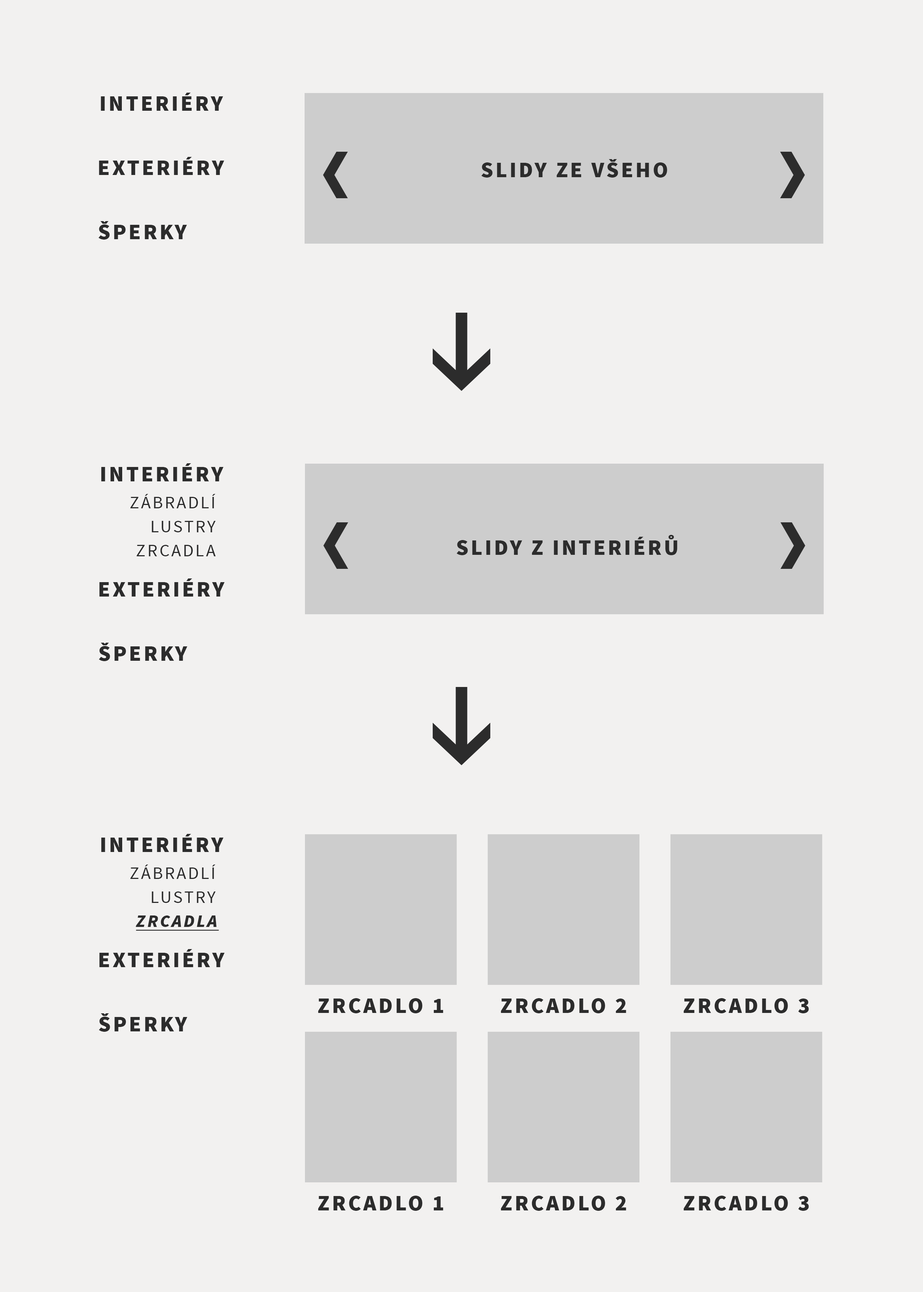
<style>
.page{position:relative;width:923px;height:1292px;background:#f2f1f0}
.page>*{position:absolute;margin:0}
.t1{font:22.1px "SourceSansPro-Black";letter-spacing:0.1em;color:#2c2c2c;text-transform:uppercase}
.t2{font:17.7px "SourceSansPro-Regular";letter-spacing:0.1em;color:#2c2c2c;text-transform:uppercase}
.t3{font:17.7px "SourceSansPro-BlackIt";letter-spacing:0.1em;color:#2c2c2c;text-transform:uppercase;text-decoration:underline}
</style>
<div class="page">
<p class="t1" style="left:101px;top:93px;width:122px;height:18px">Interiéry</p>
<p class="t1" style="left:99px;top:157px;width:125px;height:18px">exteriéry</p>
<p class="t1" style="left:481px;top:159px;width:186px;height:19px">slidy ze všeho</p>
<p class="t1" style="left:98px;top:221px;width:89px;height:19px">šperky</p>
<p class="t1" style="left:101px;top:463px;width:123px;height:18px">Interiéry</p>
<p class="t2" style="left:130px;top:494px;width:86px;height:14px">zábradlí</p>
<p class="t2" style="left:152px;top:521px;width:64px;height:11px">lustry</p>
<p class="t2" style="left:137px;top:545px;width:79px;height:11px">zrcadla</p>
<p class="t1" style="left:456px;top:535px;width:221px;height:20px">slidy z interiérů</p>
<p class="t1" style="left:99px;top:578px;width:126px;height:19px">exteriéry</p>
<p class="t1" style="left:99px;top:643px;width:89px;height:18px">šperky</p>
<p class="t1" style="left:101px;top:834px;width:123px;height:18px">Interiéry</p>
<p class="t2" style="left:130px;top:865px;width:86px;height:14px">zábradlí</p>
<p class="t2" style="left:152px;top:892px;width:64px;height:11px">lustry</p>
<p class="t3" style="left:135px;top:916px;width:84px;height:15px">zrcadla</p>
<p class="t1" style="left:99px;top:949px;width:126px;height:18px">exteriéry</p>
<p class="t1" style="left:318px;top:998px;width:125px;height:15px">zrcadlo 1</p>
<p class="t1" style="left:501px;top:998px;width:125px;height:15px">zrcadlo 2</p>
<p class="t1" style="left:683px;top:998px;width:126px;height:15px">zrcadlo 3</p>
<p class="t1" style="left:99px;top:1013px;width:89px;height:19px">šperky</p>
<p class="t1" style="left:318px;top:1196px;width:125px;height:15px">zrcadlo 1</p>
<p class="t1" style="left:501px;top:1196px;width:125px;height:15px">zrcadlo 2</p>
<p class="t1" style="left:683px;top:1196px;width:126px;height:15px">zrcadlo 3</p>
</div>
